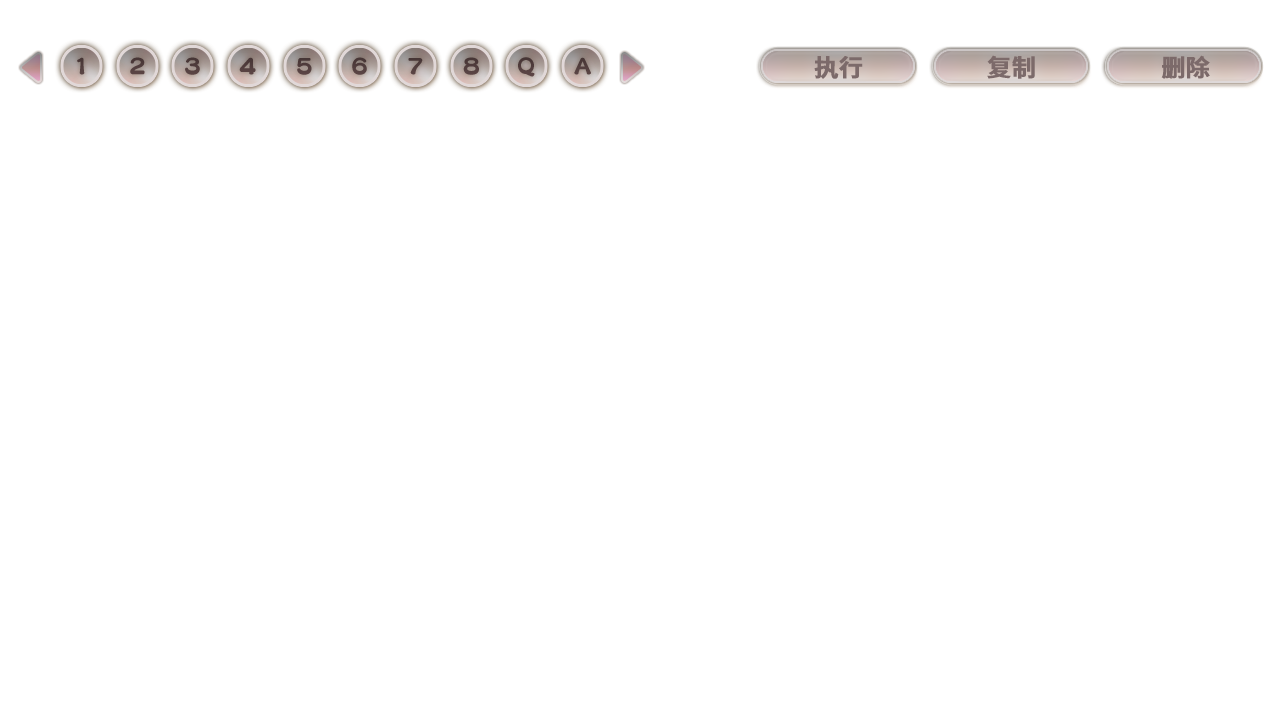
<style>
.page{position:relative;width:1280px;height:720px;background:#ffffff}
.page>*{position:absolute;margin:0}
.t1{font:24px "SourceHanSansSC-Bold";color:#666064;font-weight:bold}
</style>
<div class="page">
<p class="t1" style="left:814px;top:56px;width:49px;height:23px">执行</p>
<p class="t1" style="left:987px;top:55px;width:48px;height:24px">复制</p>
<p class="t1" style="left:1161px;top:55px;width:49px;height:24px">删除</p>
</div>
